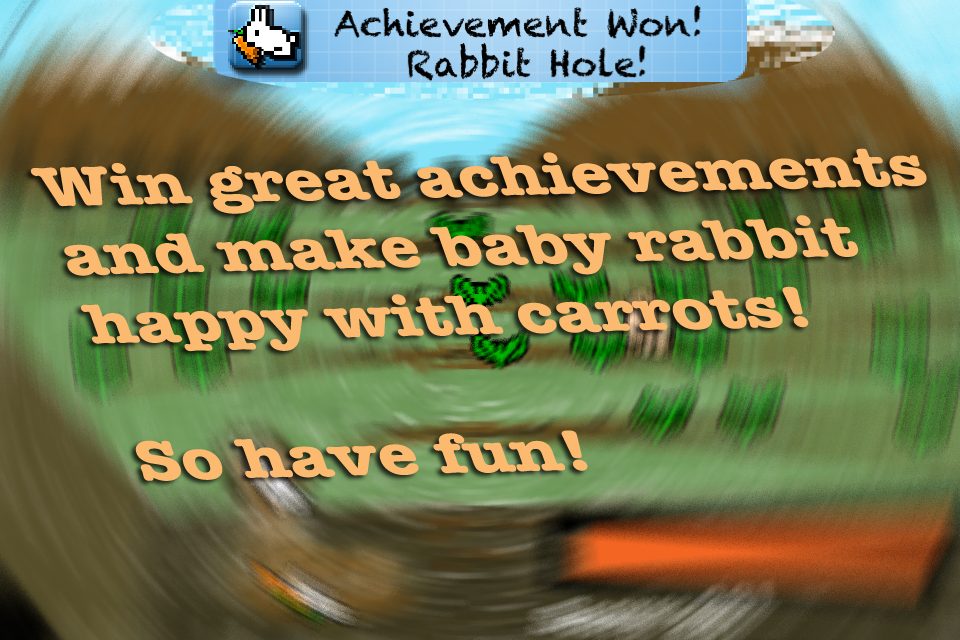
<style>
.page{position:relative;width:960px;height:640px}
.page>*{position:absolute;margin:0}
.t1{font:60.6px "AmericanTypewriter-Bold";color:#fcb970;scale:1.2 1}
</style>
<div class="page">
<p class="t1" style="left:31px;top:148px;width:896px;height:333px;rotate:-1deg">Win great achievements<br>and make baby rabbit<br>happy with carrots!<br><br>So have fun!</p>
</div>
